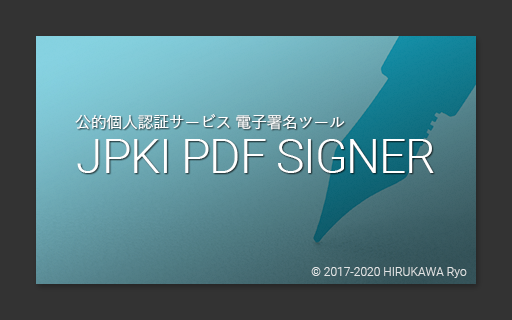
<style>
.page{position:relative;width:512px;height:320px;background:#333333}
.page>*{position:absolute;margin:0}
.t1{font:16px "YuGothic-Medium";letter-spacing:-0.025em;color:#ffffff}
.t2{font:48px "Roboto-Light";letter-spacing:-0.025em;color:#ffffff}
.t3{font:12px "Roboto-Light";color:#e1e4e5}
</style>
<div class="page">
<p class="t1" style="left:75px;top:114px;width:270px;height:16px">公的個人認証サービス 電子署名ツール</p>
<p class="t2" style="left:77px;top:139px;width:357px;height:34px">JPKI PDF SIGNER</p>
<p class="t3" style="left:311px;top:267px;width:156px;height:11px">© 2017-2020 HIRUKAWA Ryo</p>
</div>
